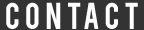
<style>
.page{position:relative;width:144px;height:30px;background:#333333}
.page>*{position:absolute;margin:0}
.t1{font:29px "Bebas";letter-spacing:0.16em;color:#ffffff}
</style>
<div class="page">
<p class="t1" style="left:6px;top:2px;width:132px;height:27px">Contact</p>
</div>
